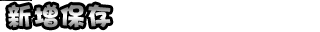
<style>
.page{position:relative;width:320px;height:32px;background:#ffffff}
.page>*{position:absolute;margin:0}
.t1{font:25.3px "DFPHaiBaoW12";letter-spacing:0.05em}
</style>
<div class="page">
<p class="t1" style="left:8px;top:4px;width:103px;height:24px">新增保存</p>
</div>
